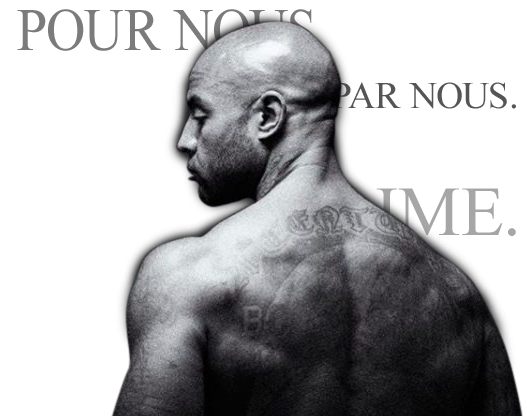
<style>
.page{position:relative;width:527px;height:416px;background:#ffffff}
.page>*{position:absolute;margin:0}
.t1{font:60.5px "TimesNewRomanPSMT";color:#7b7b7b;scale:0.9 1}
.t2{font:37.6px "TimesNewRomanPSMT";color:#555555}
.t3{font:70px "TimesNewRomanPSMT";color:#a6a6a6}
</style>
<div class="page">
<p class="t1" style="left:17px;top:9px;width:297px;height:42px">POUR NOUS</p>
<p class="t2" style="left:331px;top:82px;width:185px;height:27px">PAR NOUS.</p>
<p class="t3" style="left:302px;top:187px;width:214px;height:49px">SLIME.</p>
</div>
